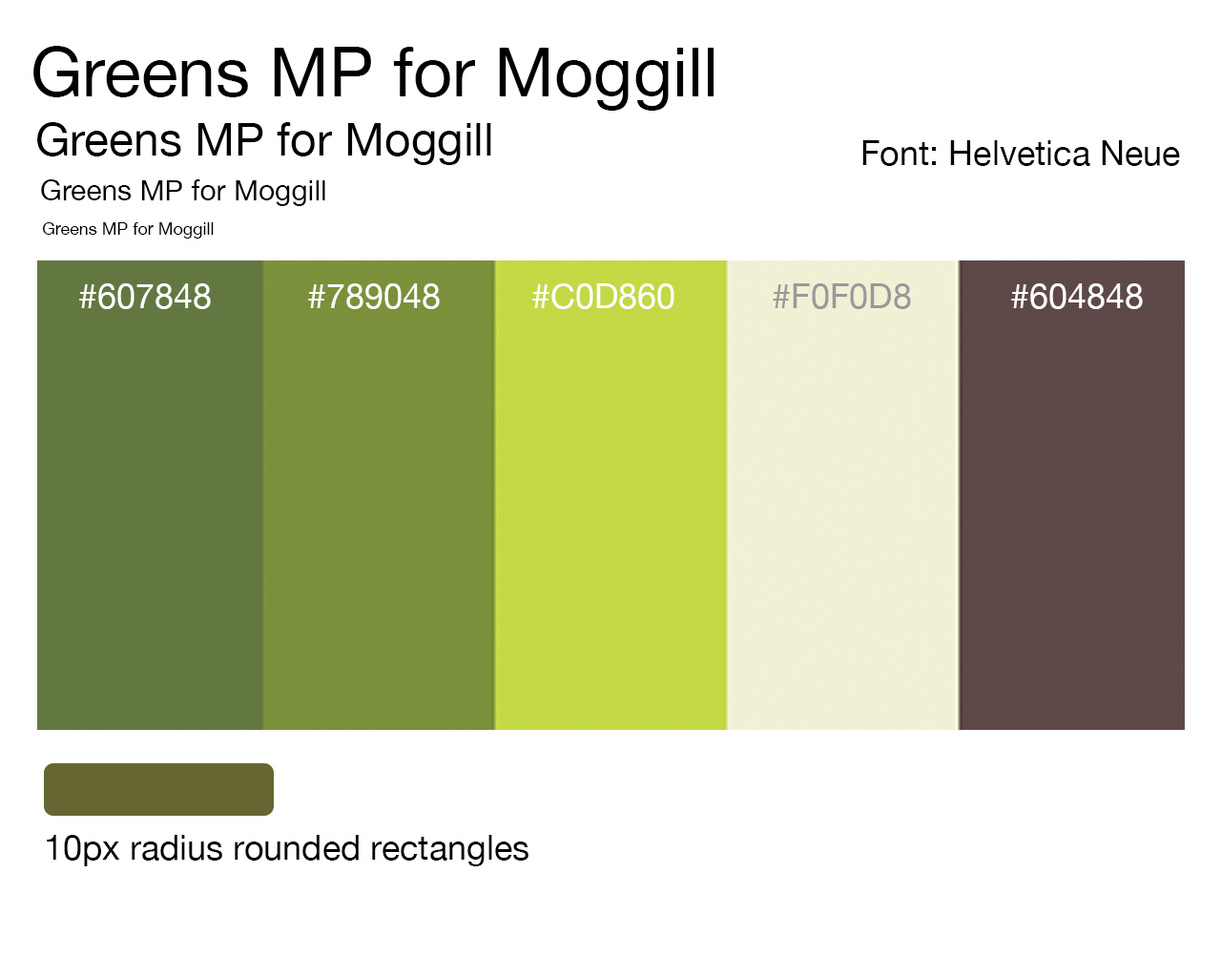
<style>
.page{position:relative;width:1221px;height:977px;background:#ffffff}
.page>*{position:absolute;margin:0}
.t1{font:68.7px "HelveticaNeue";color:#000000}
.t2{font:45.8px "HelveticaNeue";color:#000000}
.t3{font:34.3px "HelveticaNeue";color:#000000}
.t4{font:28.6px "HelveticaNeue";color:#000000}
.t5{font:17.2px "HelveticaNeue";color:#000000}
.t6{font:34.3px "HelveticaNeue";color:#ffffff}
.t7{font:34.3px "HelveticaNeue";color:#999999}
</style>
<div class="page">
<p class="t1" style="left:33px;top:46px;width:681px;height:65px">Greens MP for Moggill</p>
<p class="t2" style="left:37px;top:122px;width:454px;height:43px">Greens MP for Moggill</p>
<p class="t3" style="left:862px;top:140px;width:318px;height:26px">Font: Helvetica Neue</p>
<p class="t4" style="left:41px;top:179px;width:284px;height:27px">Greens MP for Moggill</p>
<p class="t5" style="left:42px;top:222px;width:172px;height:16px">Greens MP for Moggill</p>
<p class="t6" style="left:79px;top:283px;width:132px;height:26px">#607848</p>
<p class="t6" style="left:308px;top:283px;width:132px;height:26px">#789048</p>
<p class="t6" style="left:532px;top:283px;width:142px;height:26px">#C0D860</p>
<p class="t7" style="left:773px;top:283px;width:138px;height:26px">#F0F0D8</p>
<p class="t6" style="left:1011px;top:283px;width:132px;height:26px">#604848</p>
<p class="t3" style="left:47px;top:835px;width:481px;height:31px">10px radius rounded rectangles</p>
</div>
